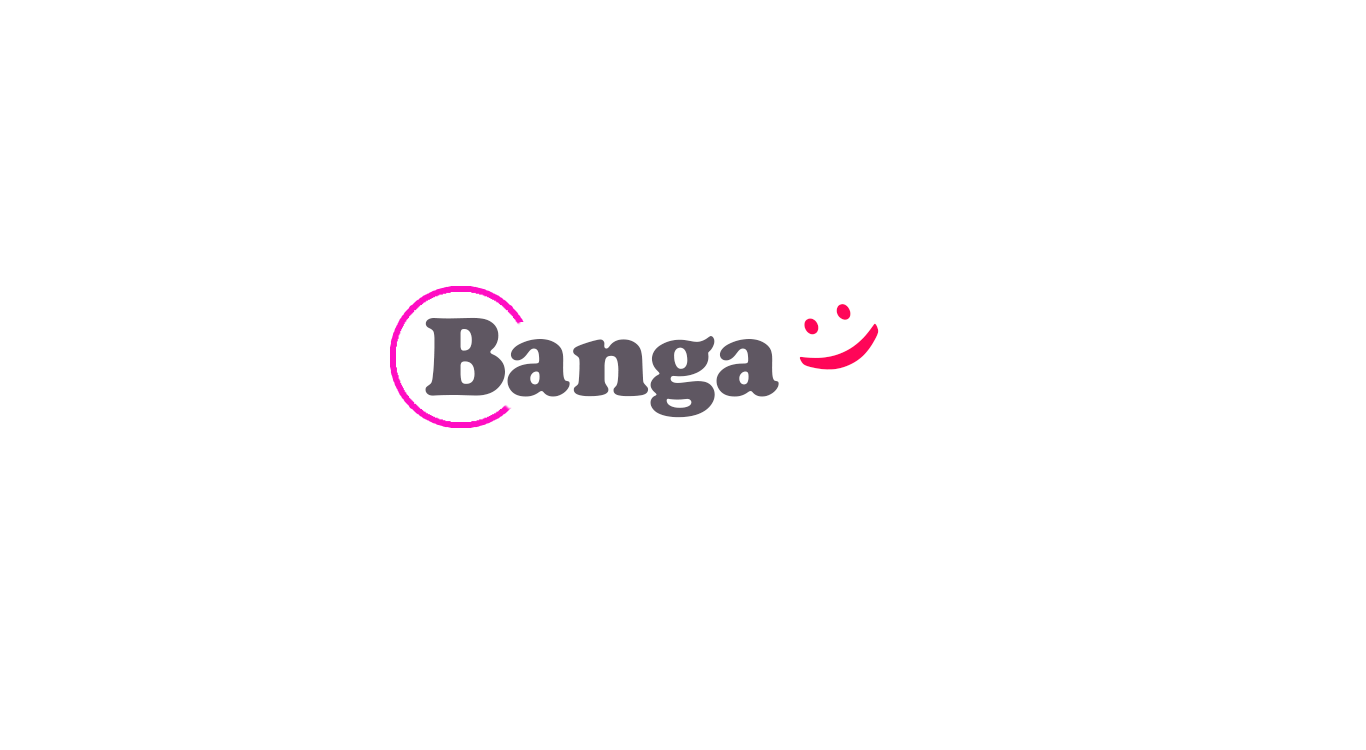
<style>
.page{position:relative;width:1366px;height:750px;background:#ffffff}
.page>*{position:absolute;margin:0}
.t1{font:88.9px "ArialRoundedMTBold";color:#ff0658;scale:1.25 1}
.t2{font:115.4px "CooperBlack";color:#5f5762}
</style>
<div class="page">
<p class="t1" style="left:799px;top:304px;width:80px;height:66px;rotate:65deg">:)</p>
<p class="t2" style="left:425px;top:317px;width:354px;height:101px">Banga</p>
</div>
